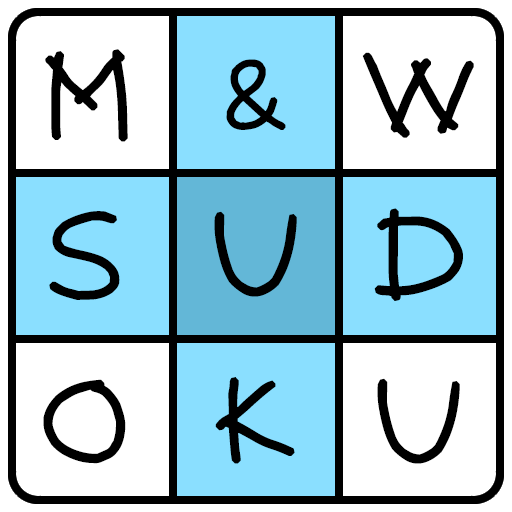
<style>
.page{position:relative;width:512px;height:512px;background:#ffffff}
.page>*{position:absolute;margin:0}
.t1{font:133.3px "Pencil-(sRB)";color:#000000}
.t2{font:106.7px "Pencil-(sRB)";color:#000000}
</style>
<div class="page">
<p class="t1" style="left:45px;top:49px;width:83px;height:93px">M</p>
<p class="t1" style="left:362px;top:52px;width:112px;height:86px">W</p>
<p class="t2" style="left:226px;top:59px;width:60px;height:71px">&amp;</p>
<p class="t1" style="left:374px;top:208px;width:89px;height:93px">D</p>
<p class="t1" style="left:49px;top:211px;width:71px;height:89px">S</p>
<p class="t1" style="left:214px;top:211px;width:83px;height:86px">U</p>
<p class="t1" style="left:215px;top:377px;width:80px;height:87px">K</p>
<p class="t1" style="left:43px;top:379px;width:83px;height:85px">O</p>
<p class="t1" style="left:377px;top:378px;width:83px;height:86px">U</p>
</div>
